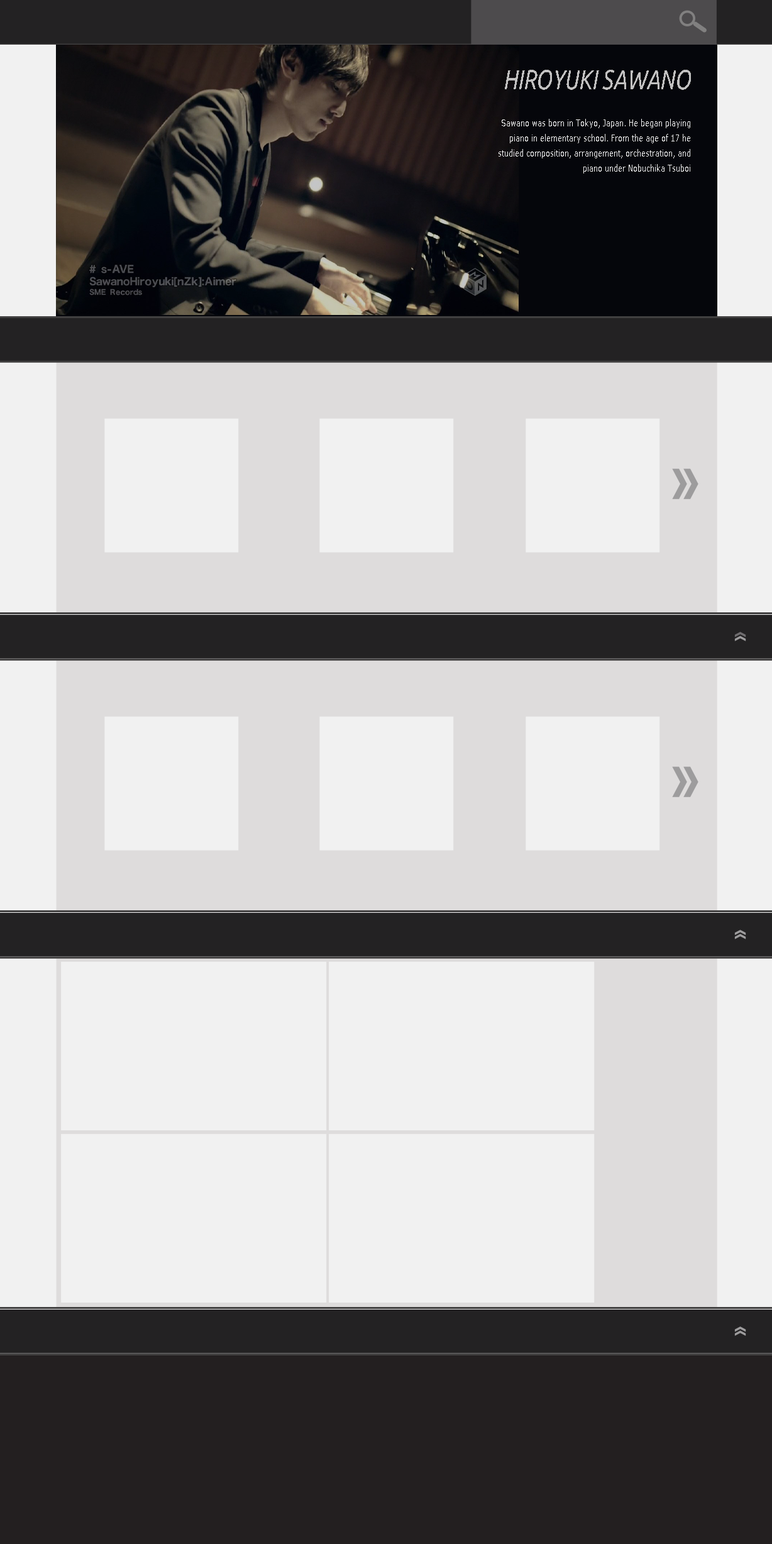
<style>
.page{position:relative;width:772px;height:1544px;background:#f1f1f1}
.page>*{position:absolute;margin:0}
.t1{font:27.4px "Ubuntu-Italic";color:#c1c0c0;text-transform:uppercase;scale:0.79 1}
.t2{font:9.1px/15.1px "Verdana";color:#f1f1f1;scale:0.79 1}
</style>
<div class="page">
<p class="t1" style="left:505px;top:70px;width:186px;height:20px">Hiroyuki Sawano</p>
<p class="t2" style="left:499px;top:119px;width:191px;height:55px;text-align:right">Sawano was born in Tokyo, Japan. He began playing piano in elementary school. From the age of 17 he studied composition, arrangement, orchestration, and piano under Nobuchika Tsuboi</p>
</div>
